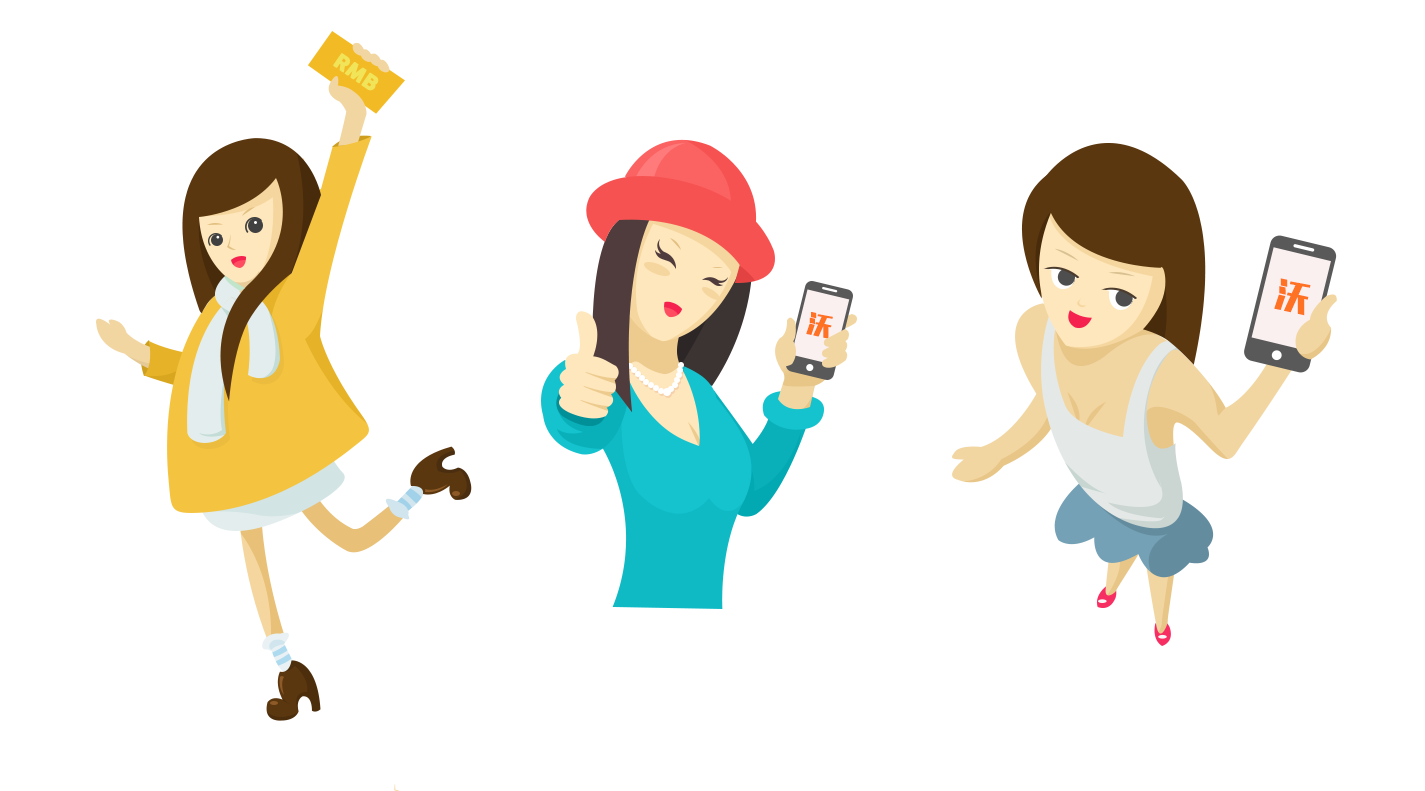
<style>
.page{position:relative;width:1425px;height:791px;background:#ffffff}
.page>*{position:absolute;margin:0}
.t1{font:20px "COCOGOOSE";color:#f1e458;text-transform:uppercase;font-weight:bold}
.t2{font:32.4px "MFLiHei_Noncommercial-Regular";color:#ff7123;text-transform:uppercase;font-weight:bold}
.t3{font:23.5px "MFLiHei_Noncommercial-Regular";color:#ff7123;text-transform:uppercase;font-weight:bold}
</style>
<div class="page">
<p class="t1" style="left:333px;top:53px;width:46px;height:38px;rotate:35deg">rmb</p>
<p class="t2" style="left:1274px;top:278px;width:37px;height:38px;rotate:12deg">沃</p>
<p class="t3" style="left:806px;top:312px;width:27px;height:27px;rotate:12deg">沃</p>
</div>
